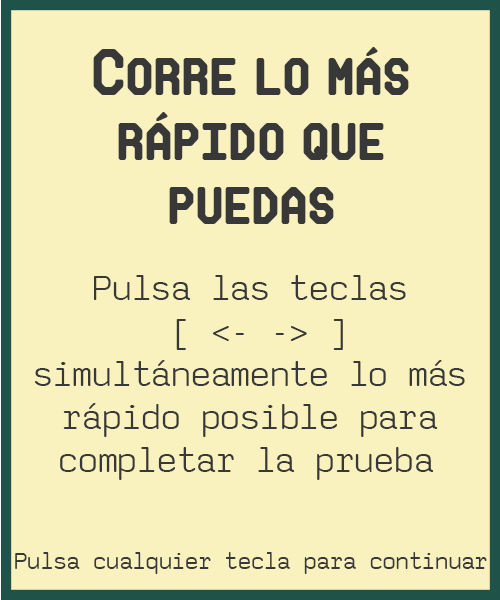
<style>
.page{position:relative;width:500px;height:600px;background:#f9f1be}
.page>*{position:absolute;margin:0}
.t1{font:54px "Makisupa";color:#383838}
.t2{font:36px "saxMono";color:#383838}
.t3{font:24px "saxMono";color:#383838}
</style>
<div class="page">
<p class="t1" style="left:93px;top:47px;width:316px;height:177px;text-align:center">Corre lo más <br>rápido que <br>puedas</p>
<p class="t2" style="left:35px;top:275px;width:430px;height:205px;text-align:center">Pulsa las teclas<br> [ &lt;- -&gt; ]<br>simultáneamente lo más<br>rápido posible para<br>completar la prueba</p>
<p class="t3" style="left:15px;top:552px;width:472px;height:22px">Pulsa cualquier tecla para continuar</p>
</div>
